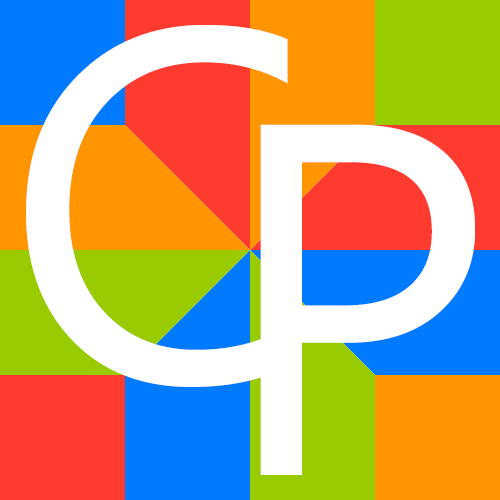
<style>
.page{position:relative;width:500px;height:500px;background:#ffffff}
.page>*{position:absolute;margin:0}
.t1{font:500px "SegoeUI";color:#ffffff}
</style>
<div class="page">
<p class="t1" style="left:26px;top:25px;width:262px;height:362px">C</p>
<p class="t1" style="left:260px;top:124px;width:215px;height:351px">P</p>
</div>
